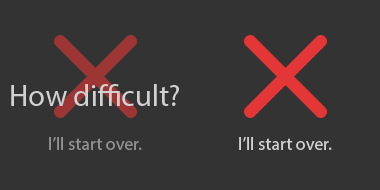
<style>
.page{position:relative;width:380px;height:190px;background:#333333}
.page>*{position:absolute;margin:0}
.t1{font:30px "MyriadPro-Regular";color:#d1d1d1}
.t2{font:18px "MyriadPro-Regular";color:#929292}
.t3{font:18px "MyriadPro-Regular";color:#d1d1d1}
</style>
<div class="page">
<p class="t1" style="left:11px;top:84px;width:168px;height:22px">How difficult?</p>
<p class="t2" style="left:49px;top:137px;width:93px;height:13px">I’ll start over.</p>
<p class="t3" style="left:239px;top:137px;width:93px;height:13px">I’ll start over.</p>
</div>
